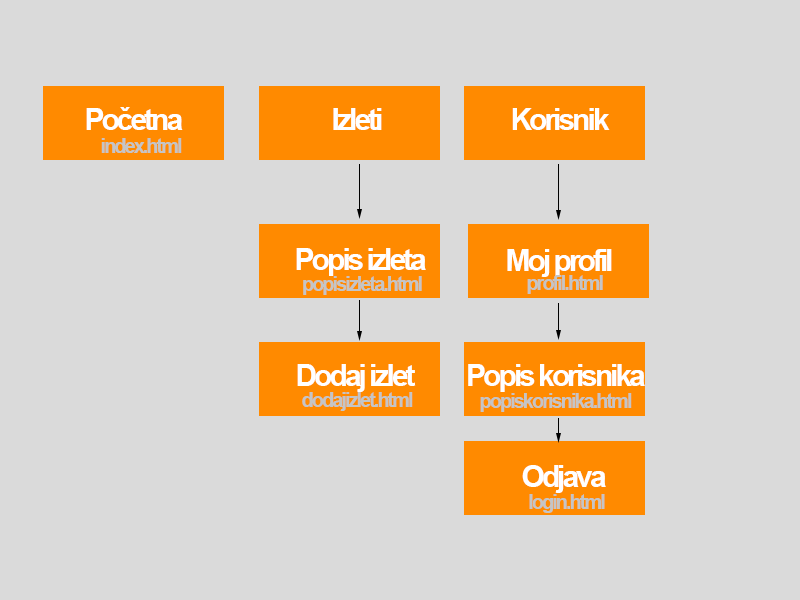
<style>
.page{position:relative;width:800px;height:600px;background:#dadada}
.page>*{position:absolute;margin:0}
.t1{font:30px "Arial-BoldMT";letter-spacing:-0.1em;color:#ffffff}
.t2{font:20px "Arial-BoldMT";letter-spacing:-0.1em;color:#c5c5c5}
</style>
<div class="page">
<p class="t1" style="left:86px;top:107px;width:97px;height:23px">Početna</p>
<p class="t1" style="left:333px;top:108px;width:49px;height:22px">Izleti</p>
<p class="t1" style="left:512px;top:108px;width:98px;height:22px">Korisnik</p>
<p class="t2" style="left:101px;top:138px;width:81px;height:15px">index.html</p>
<p class="t1" style="left:296px;top:248px;width:130px;height:28px">Popis izleta</p>
<p class="t1" style="left:507px;top:249px;width:105px;height:28px">Moj profil</p>
<p class="t2" style="left:303px;top:276px;width:119px;height:19px">popisizleta.html</p>
<p class="t2" style="left:527px;top:275px;width:76px;height:19px">profil.html</p>
<p class="t1" style="left:297px;top:364px;width:119px;height:28px">Dodaj izlet</p>
<p class="t1" style="left:468px;top:364px;width:177px;height:28px">Popis korisnika</p>
<p class="t2" style="left:302px;top:392px;width:111px;height:19px">dodajizlet.html</p>
<p class="t2" style="left:480px;top:393px;width:152px;height:19px">popiskorisnika.html</p>
<p class="t1" style="left:522px;top:465px;width:84px;height:28px">Odjava</p>
<p class="t2" style="left:529px;top:494px;width:76px;height:19px">login.html</p>
</div>
